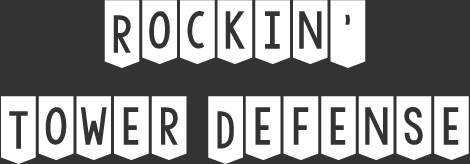
<style>
.page{position:relative;width:470px;height:164px;background:#333333}
.page>*{position:absolute;margin:0}
.t1{font:80px "KGChasingCars";color:#ffffff}
</style>
<div class="page">
<p class="t1" style="left:1px;top:0px;width:468px;height:164px;text-align:center">Rockin’<br>Tower Defense</p>
</div>
